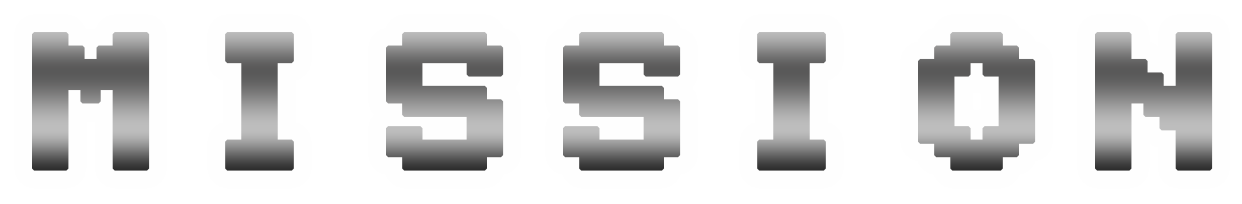
<style>
.page{position:relative;width:1242px;height:204px;background:#ffffff}
.page>*{position:absolute;margin:0}
.t1{font:215px "DOSIyagiMedium";letter-spacing:0.16em;font-weight:bold;scale:1.2 1}
</style>
<div class="page">
<p class="t1" style="left:32px;top:32px;width:1181px;height:139px">MISSION</p>
</div>
